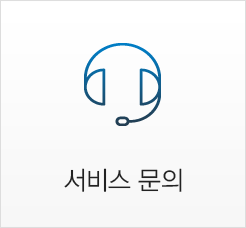
<style>
.page{position:relative;width:246px;height:228px}
.page>*{position:absolute;margin:0}
.t1{font:26px "YDVYGO32";letter-spacing:-0.025em;color:#222222;scale:0.95 1}
</style>
<div class="page">
<p class="t1" style="left:64px;top:168px;width:118px;height:24px">서비스 문의</p>
</div>
